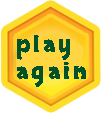
<style>
.page{position:relative;width:103px;height:114px;background:#ffffff}
.page>*{position:absolute;margin:0}
.t1{font:22px "Skranji-Bold";letter-spacing:0.15em;color:#01512b}
</style>
<div class="page">
<p class="t1" style="left:17px;top:35px;width:69px;height:52px;text-align:right">play<br>again</p>
</div>
